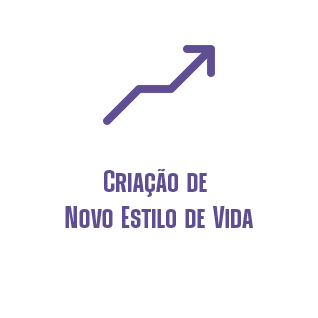
<style>
.page{position:relative;width:318px;height:318px;background:#ffffff}
.page>*{position:absolute;margin:0}
.t1{font:30px "HighmanTrial-Regular";color:#604e93}
</style>
<div class="page">
<p class="t1" style="left:65px;top:169px;width:188px;height:59px;text-align:center">Criação de <br>Novo Estilo de Vida</p>
</div>
